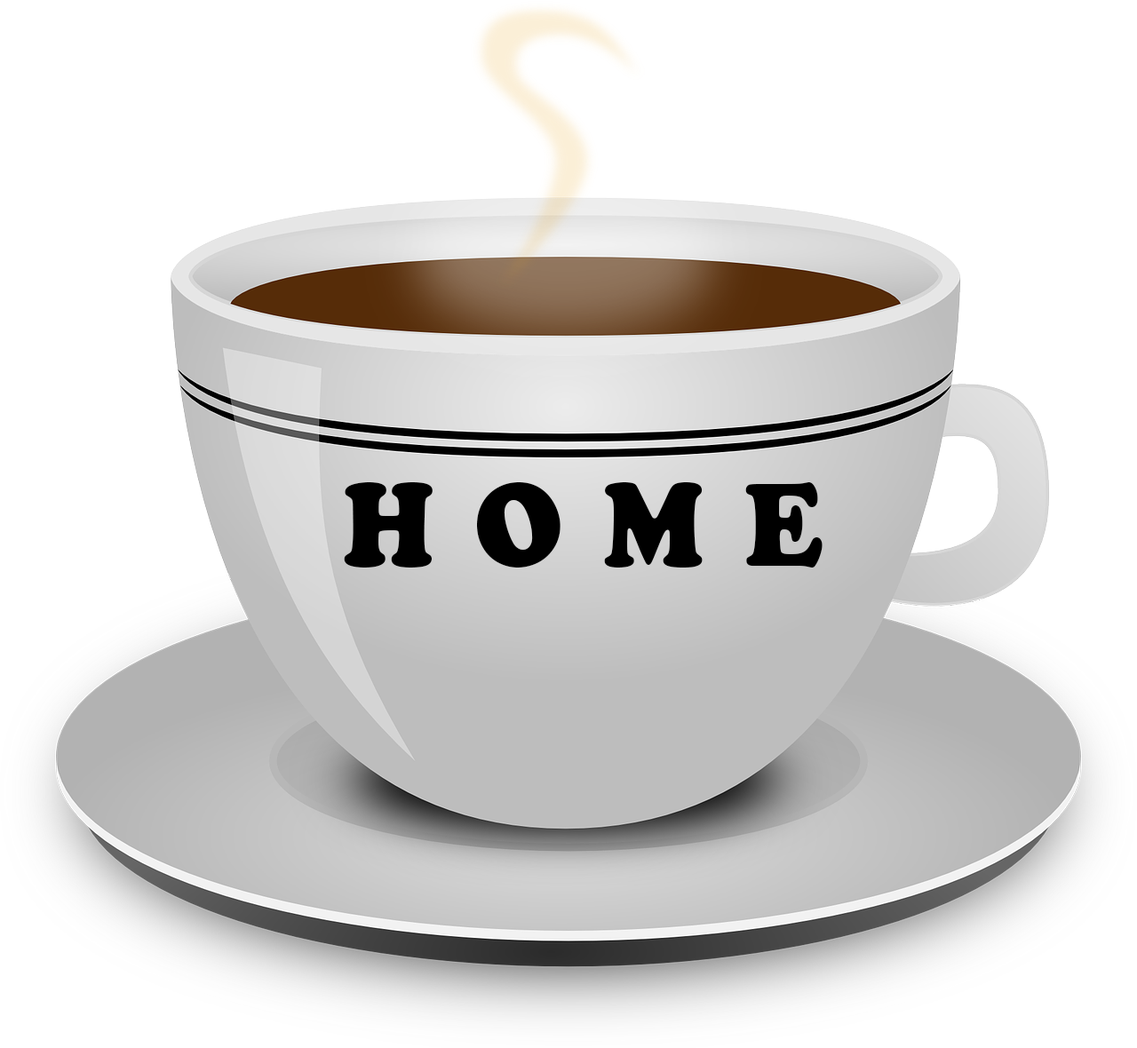
<style>
.page{position:relative;width:1137px;height:1048px;background:#ffffff}
.page>*{position:absolute;margin:0}
.t1{font:122.6px "CooperBlack";letter-spacing:0.36em;color:#000000;scale:0.92 1}
</style>
<div class="page">
<p class="t1" style="left:344px;top:482px;width:479px;height:86px">HOME</p>
</div>
